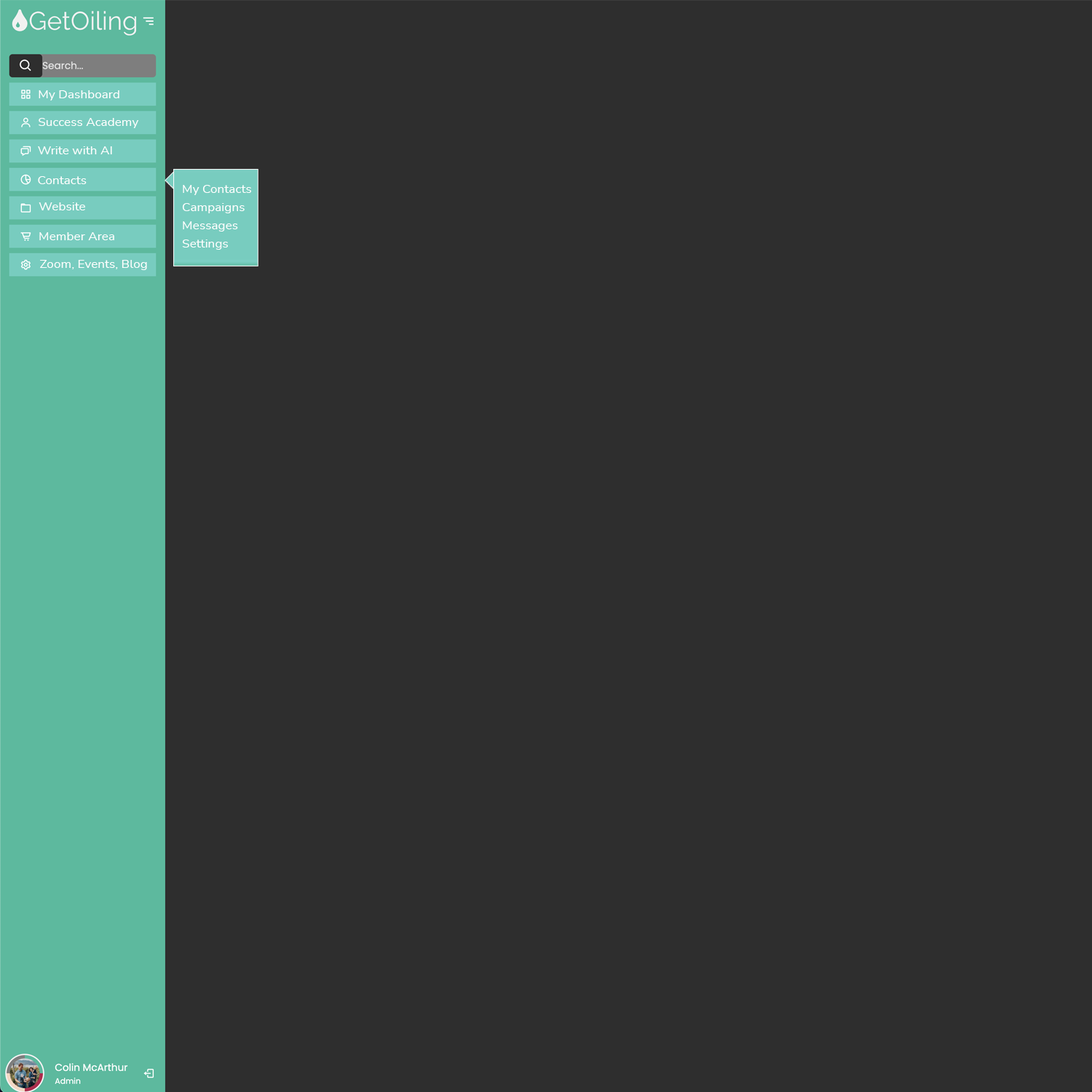
<style>
.page{position:relative;width:1092px;height:1092px;background:#2e2e2e}
.page>*{position:absolute;margin:0}
.t1{font:11.4px "NunitoSans-Regular";color:#ffffff;scale:1.1 1}
.t2{font:11.4px/18.2px "NunitoSans-Regular";color:#ffffff;scale:1.1 1}
</style>
<div class="page">
<p class="t1" style="left:39px;top:90px;width:80px;height:10px">My Dashboard</p>
<p class="t1" style="left:39px;top:118px;width:100px;height:10px">Success Academy</p>
<p class="t1" style="left:38px;top:146px;width:74px;height:8px">Write with AI</p>
<p class="t1" style="left:38px;top:176px;width:49px;height:8px">Contacts</p>
<p class="t2" style="left:182px;top:185px;width:69px;height:65px">My Contacts<br>Campaigns<br>Messages<br>Settings</p>
<p class="t1" style="left:39px;top:202px;width:46px;height:8px">Website</p>
<p class="t1" style="left:39px;top:232px;width:75px;height:8px">Member Area</p>
<p class="t1" style="left:40px;top:260px;width:107px;height:10px">Zoom, Events, Blog</p>
</div>
